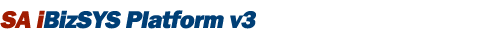
<style>
.page{position:relative;width:477px;height:34px;background:#ffffff}
.page>*{position:absolute;margin:0}
.t1{font:25px "FranklinGothic-Heavy";letter-spacing:-0.025em;color:#003f76;font-style:italic}
.t2{font:25px "FranklinGothic-Heavy";letter-spacing:-0.025em;color:#a01b00;font-style:italic}
</style>
<div class="page">
<p class="t1" style="left:0px;top:10px;width:256px;height:19px"><span class="t2">SA i</span>BizSYS Platform v3</p>
</div>
